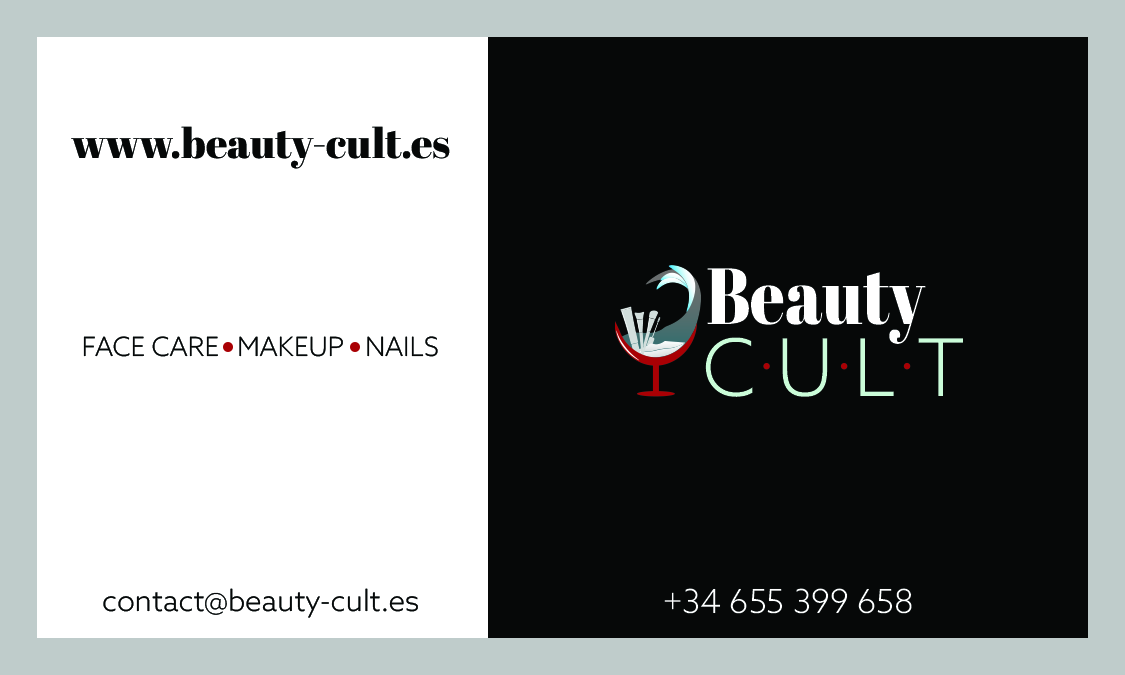
<style>
.page{position:relative;width:1125px;height:675px;background:#060808}
.page>*{position:absolute;margin:0}
.t1{font:41.7px "AbrilFatface-Regular";color:#060808}
.t2{font:26.4px "AzoSans-Light";color:#060808;text-transform:uppercase}
.t3{font:29.2px "AzoSans-Light";color:#060808}
.t4{font:33.3px "AzoSans-Light";color:#feffff}
</style>
<div class="page">
<p class="t1" style="left:71px;top:126px;width:379px;height:43px">www.beauty-cult.es</p>
<p class="t2" style="left:83px;top:336px;width:135px;height:21px">face care</p>
<p class="t2" style="left:239px;top:336px;width:104px;height:21px">makeup</p>
<p class="t2" style="left:367px;top:336px;width:71px;height:21px">nails</p>
<p class="t3" style="left:103px;top:588px;width:315px;height:30px">contact@beauty-cult.es</p>
<p class="t4" style="left:664px;top:588px;width:248px;height:26px">+34 655 399 658</p>
</div>
